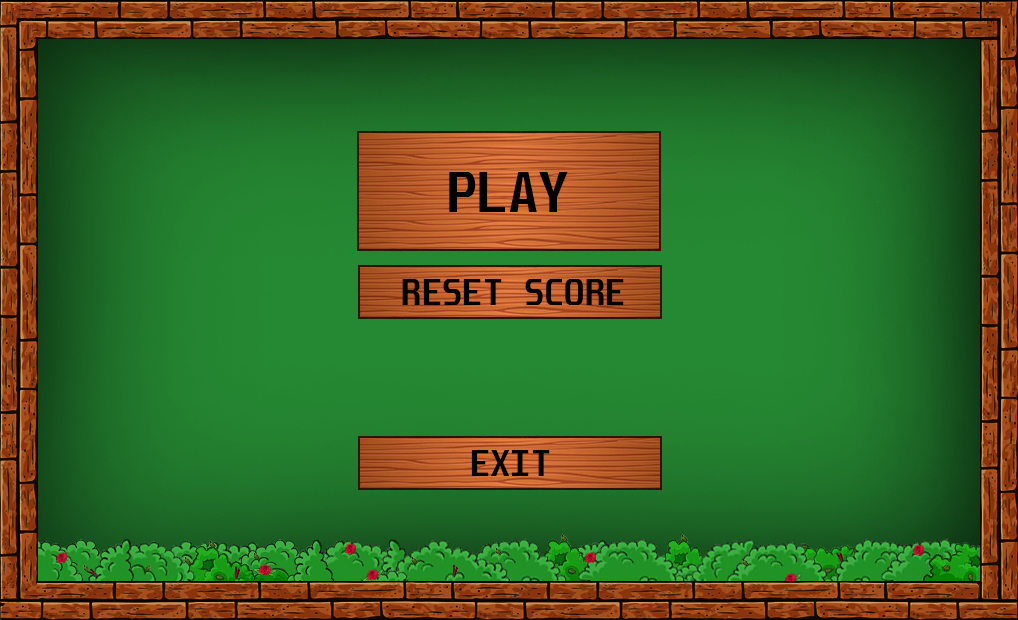
<style>
.page{position:relative;width:1018px;height:620px}
.page>*{position:absolute;margin:0}
.t1{font:50px "Unispace-Bold";color:#000000}
.t2{font:33.3px "Unispace-Bold";color:#000000}
</style>
<div class="page">
<p class="t1" style="left:449px;top:172px;width:119px;height:40px">PLAY</p>
<p class="t2" style="left:402px;top:279px;width:222px;height:26px">RESET SCORE</p>
<p class="t2" style="left:471px;top:450px;width:79px;height:26px">EXIT</p>
</div>
